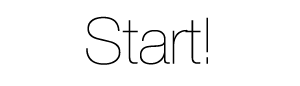
<style>
.page{position:relative;width:300px;height:86px;background:#ffffff}
.page>*{position:absolute;margin:0}
.t1{font:64px "HelveticaNeue-UltraLight";color:#000000}
</style>
<div class="page">
<p class="t1" style="left:86px;top:16px;width:122px;height:49px">Start!</p>
</div>
